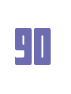
<style>
.page{position:relative;width:71px;height:94px;background:#ffffff}
.page>*{position:absolute;margin:0}
.t1{font:50px "Far-Out!";color:#6d6cb0}
</style>
<div class="page">
<p class="t1" style="left:15px;top:28px;width:36px;height:37px">90</p>
</div>
